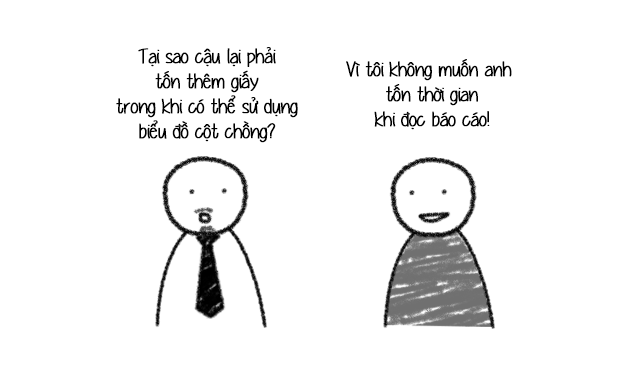
<style>
.page{position:relative;width:617px;height:375px;background:#ffffff}
.page>*{position:absolute;margin:0}
.t1{font:20.8px "UVFYummyCupcakes";letter-spacing:-0.02em;color:#000000;font-weight:bold}
</style>
<div class="page">
<p class="t1" style="left:116px;top:47px;width:182px;height:96px;text-align:center">Tại sao cậu lại phải<br>tốn thêm giấy<br>trong khi có thể sử dụng<br>biểu đồ cột chồng?</p>
<p class="t1" style="left:346px;top:59px;width:166px;height:71px;text-align:center">Vì tôi không muốn anh <br>tốn thời gian<br>khi đọc báo cáo!</p>
</div>
